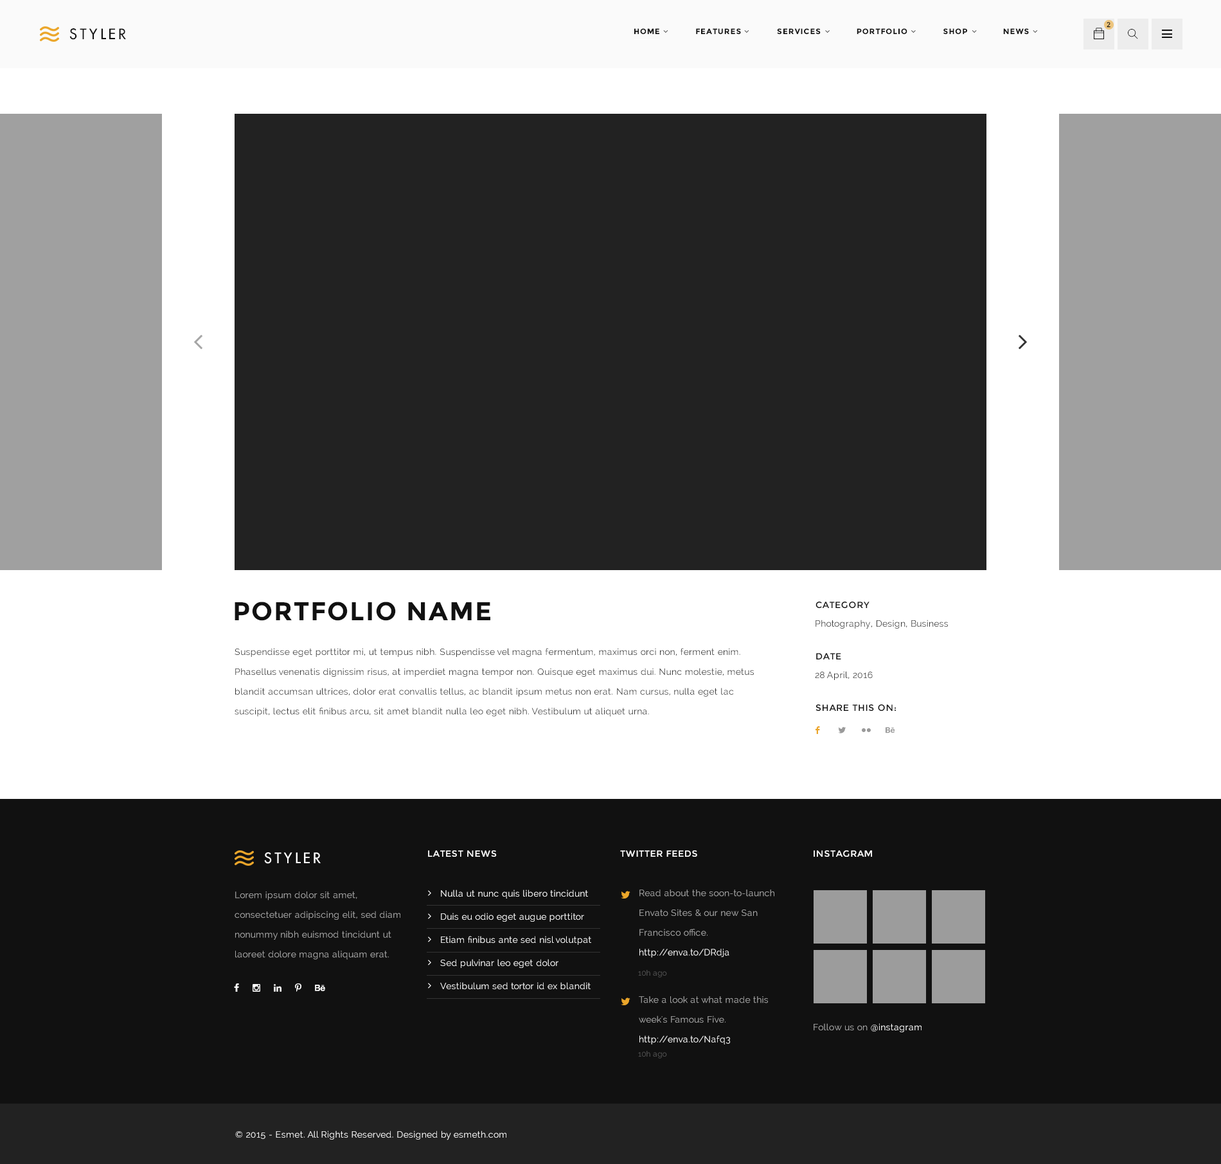
<style>
.page{position:relative;width:1221px;height:1164px;background:#222222}
.page>*{position:absolute;margin:0}
.t1{font:14.1px "FuturaLT";letter-spacing:0.2em;color:#111111;text-transform:uppercase}
.t2{font:7.7px "Montserrat-Bold";letter-spacing:0.075em;color:#111111;text-transform:uppercase}
.t3{font:7.1px "Montserrat-Regular";letter-spacing:0.075em;color:#111111;text-transform:uppercase}
.t4{font:25.7px "Montserrat-Bold";letter-spacing:0.05em;color:#111111;text-transform:uppercase}
.t5{font:9px "Montserrat-Regular";letter-spacing:0.05em;color:#111111;text-transform:uppercase}
.t6{font:9px "Raleway";letter-spacing:0.02em;color:#333333}
.t7{font:9px/19.8px "Raleway";letter-spacing:0.02em;color:#333333}
.t8{font:12.9px "Socialico";letter-spacing:0.02em;color:#eba62a}
.t9{font:12.9px "Socialico";letter-spacing:0.02em;color:#9a9a9a}
.t10{font:14.1px "FuturaLT";letter-spacing:0.2em;color:#ffffff;text-transform:uppercase}
.t11{font:9px "Montserrat-Regular";letter-spacing:0.05em;color:#ffffff;text-transform:uppercase}
.t12{font:9px/19.8px "Raleway";letter-spacing:0.02em;color:#a9a9a9}
.t13{font:9px/23.1px "Raleway";letter-spacing:0.02em;color:#ffffff}
.t14{font:9px/19.8px "Raleway";letter-spacing:0.02em;color:#ffffff}
.t15{font:7.7px "Raleway";letter-spacing:0.02em;color:#545454}
.t16{font:9px "Raleway";letter-spacing:0.02em;color:#a9a9a9}
.t17{font:9px "Raleway";letter-spacing:0.02em;color:#ffffff}
</style>
<div class="page">
<p class="t1" style="left:69px;top:28px;width:57px;height:12px">styler</p>
<p class="t2" style="left:634px;top:28px;width:395px;height:6px">HOME              FEATURES              SERVICES              portfolio              SHOP              NEWS</p>
<p class="t3" style="left:1107px;top:22px;width:4px;height:6px">2</p>
<p class="t4" style="left:235px;top:602px;width:256px;height:19px">portfolio name</p>
<p class="t5" style="left:816px;top:602px;width:54px;height:6px">category</p>
<p class="t6" style="left:816px;top:620px;width:132px;height:9px">Photography, Design, Business</p>
<p class="t7" style="left:235px;top:648px;width:519px;height:69px">Suspendisse eget porttitor mi, ut tempus nibh. Suspendisse vel magna fermentum, maximus orci non, ferment enim. Phasellus venenatis dignissim risus, at imperdiet magna tempor non. Quisque eget maximus dui. Nunc molestie, metus blandit accumsan ultrices, dolor erat convallis tellus, ac blandit ipsum metus non erat. Nam cursus, nulla eget lac suscipit, lectus elit finibus arcu, sit amet blandit nulla leo eget nibh. Vestibulum ut aliquet urna.</p>
<p class="t5" style="left:816px;top:653px;width:26px;height:7px">date</p>
<p class="t6" style="left:815px;top:671px;width:58px;height:9px">28 April, 2016</p>
<p class="t5" style="left:816px;top:705px;width:80px;height:6px">Share this on:</p>
<p class="t8" style="left:816px;top:726px;width:4px;height:8px">F</p>
<p class="t9" style="left:838px;top:727px;width:9px;height:7px">L</p>
<p class="t9" style="left:862px;top:728px;width:9px;height:4px">N</p>
<p class="t9" style="left:886px;top:727px;width:10px;height:7px">E</p>
<p class="t10" style="left:264px;top:852px;width:57px;height:12px">styler</p>
<p class="t11" style="left:428px;top:851px;width:69px;height:6px">latest news</p>
<p class="t11" style="left:620px;top:851px;width:78px;height:6px">twitter feeds</p>
<p class="t11" style="left:814px;top:851px;width:58px;height:6px">instagram</p>
<p class="t12" style="left:235px;top:892px;width:166px;height:68px">Lorem ipsum dolor sit amet, consectetuer adipiscing elit, sed diam nonummy nibh euismod tincidunt ut laoreet dolore magna aliquam erat.</p>
<p class="t13" style="left:440px;top:890px;width:151px;height:100px">Nulla ut nunc quis libero tincidunt<br>Duis eu odio eget augue porttitor<br>Etiam finibus ante sed nisl volutpat<br>Sed pulvinar leo eget dolor<br>Vestibulum sed tortor id ex blandit</p>
<p class="t12" style="left:640px;top:890px;width:135px;height:68px">Read about the soon-to-launch Envato Sites &amp; our new San Francisco office. <span class="t14">http://enva.to/DRdja</span></p>
<p class="t15" style="left:638px;top:970px;width:29px;height:8px">10h ago</p>
<p class="t12" style="left:639px;top:996px;width:129px;height:49px">Take a look at what made this week's Famous Five. <span class="t14">http://enva.to/Nafq3</span></p>
<p class="t16" style="left:814px;top:1023px;width:108px;height:9px">Follow us on <span class="t17">@instagram</span></p>
<p class="t15" style="left:638px;top:1051px;width:29px;height:8px">10h ago</p>
<p class="t17" style="left:235px;top:1131px;width:272px;height:9px">© 2015 - Esmet. All Rights Reserved. Designed by esmeth.com</p>
</div>
